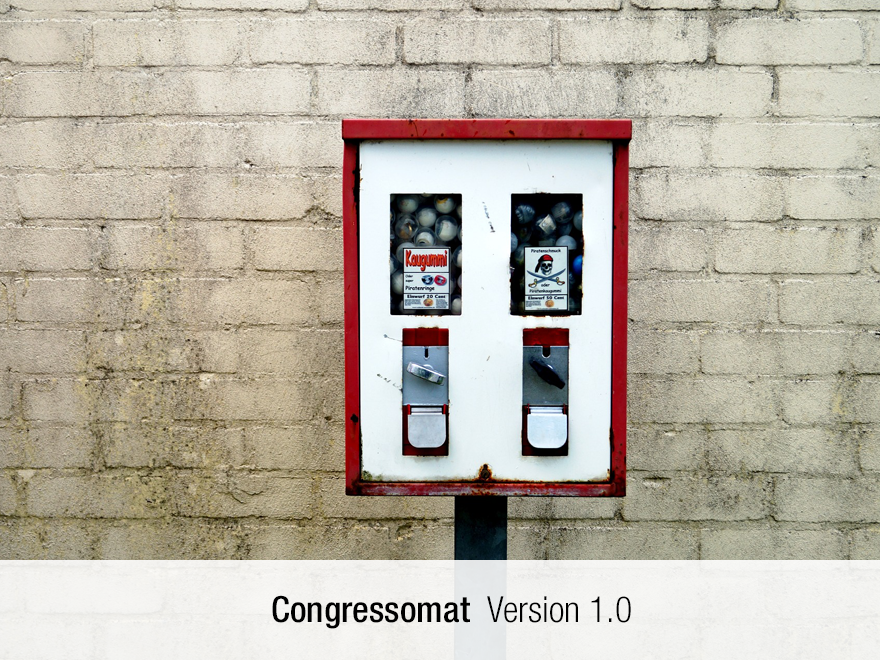
<style>
.page{position:relative;width:880px;height:660px}
.page>*{position:absolute;margin:0}
.t1{font:36px "HelveticaNeueLTStd-MdCn";color:#000000}
.t2{font:36px "HelveticaNeueLTStd-LtCn";color:#000000}
</style>
<div class="page">
<p class="t1" style="left:272px;top:595px;width:359px;height:34px">Congressomat <span class="t2">Version 1.0</span></p>
</div>
